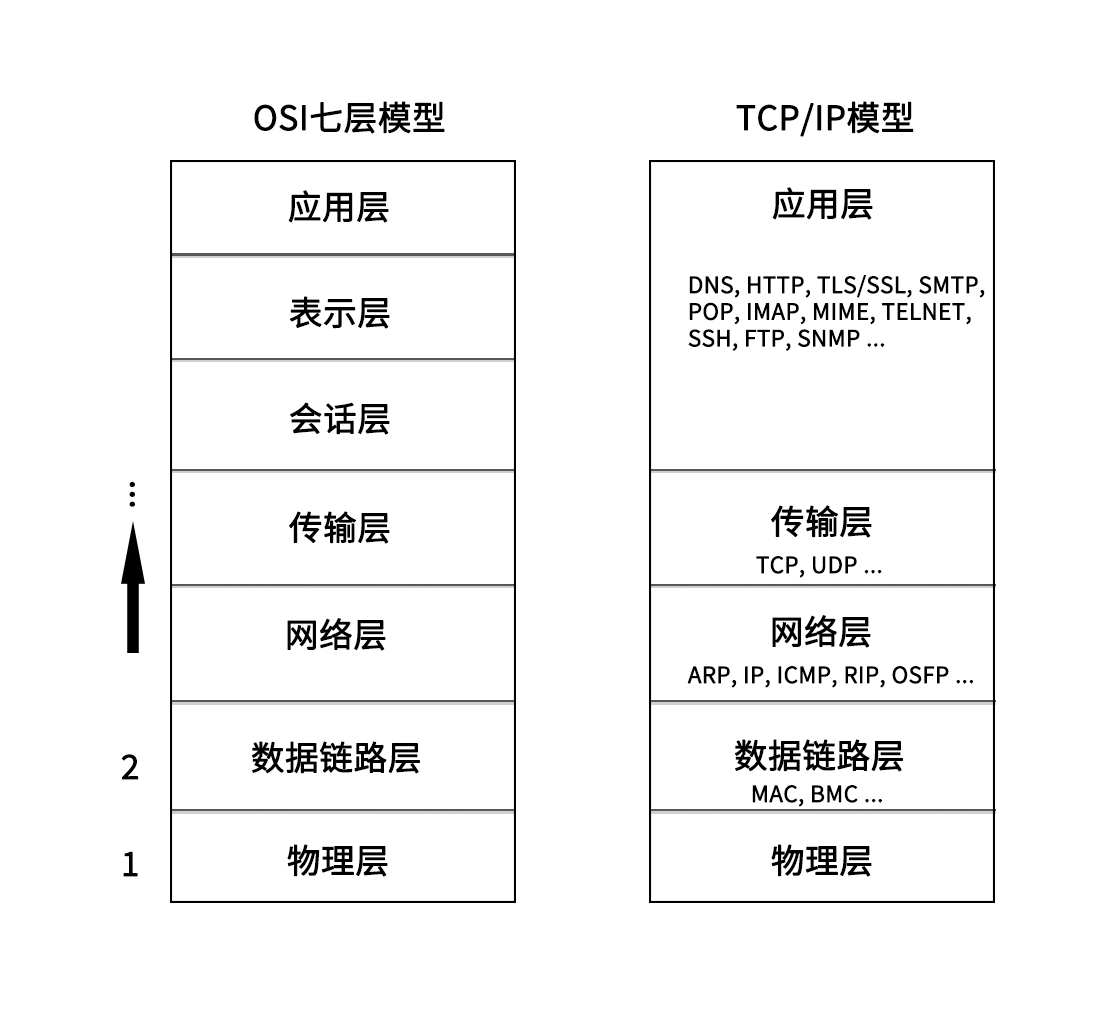
<style>
.page{position:relative;width:1100px;height:1024px;background:#ffffff}
.page>*{position:absolute;margin:0}
.t1{font:33.3px "SourceHanSansCN-Normal";color:#000000;font-weight:bold}
.t2{font:22.2px "SourceHanSansCN-Normal";color:#000000;font-weight:bold}
</style>
<div class="page">
<p class="t1" style="left:254px;top:101px;width:191px;height:33px">OSI七层模型</p>
<p class="t1" style="left:736px;top:101px;width:178px;height:36px">TCP/IP模型</p>
<p class="t1" style="left:288px;top:190px;width:101px;height:33px">应用层</p>
<p class="t1" style="left:772px;top:187px;width:101px;height:33px">应用层</p>
<p class="t2" style="left:688px;top:275px;width:297px;height:76px">DNS, HTTP, TLS/SSL, SMTP,<br>POP, IMAP, MIME, TELNET,<br>SSH, FTP, SNMP ...</p>
<p class="t1" style="left:289px;top:296px;width:101px;height:33px">表示层</p>
<p class="t1" style="left:290px;top:402px;width:100px;height:33px">会话层</p>
<p class="t1" style="left:129px;top:481px;width:6px;height:26px">...</p>
<p class="t1" style="left:771px;top:505px;width:101px;height:33px">传输层</p>
<p class="t1" style="left:289px;top:511px;width:101px;height:33px">传输层</p>
<p class="t2" style="left:756px;top:556px;width:126px;height:22px">TCP, UDP ...</p>
<p class="t1" style="left:772px;top:615px;width:99px;height:33px">网络层</p>
<p class="t1" style="left:287px;top:618px;width:99px;height:33px">网络层</p>
<p class="t2" style="left:687px;top:666px;width:287px;height:22px">ARP, IP, ICMP, RIP, OSFP ...</p>
<p class="t1" style="left:252px;top:741px;width:168px;height:33px">数据链路层</p>
<p class="t1" style="left:735px;top:739px;width:168px;height:33px">数据链路层</p>
<p class="t1" style="left:121px;top:754px;width:18px;height:26px">2</p>
<p class="t2" style="left:752px;top:785px;width:130px;height:22px">MAC, BMC ...</p>
<p class="t1" style="left:287px;top:844px;width:101px;height:33px">物理层</p>
<p class="t1" style="left:771px;top:844px;width:101px;height:33px">物理层</p>
<p class="t1" style="left:123px;top:851px;width:15px;height:26px">1</p>
</div>
